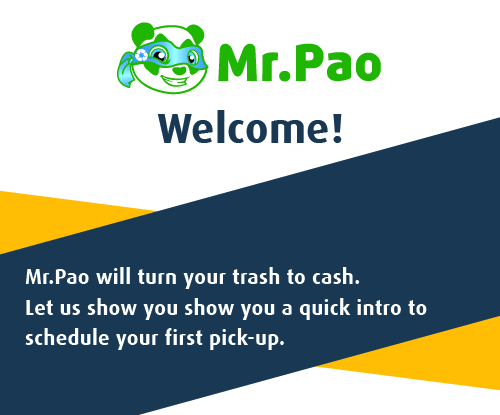
<style>
.page{position:relative;width:500px;height:415px;background:#ffffff}
.page>*{position:absolute;margin:0}
.t1{font:42.2px "DaxBold";letter-spacing:0.01em;color:#183853}
.t2{font:21.1px/30.6px "DaxBold";letter-spacing:0.01em;color:#ffffff}
</style>
<div class="page">
<p class="t1" style="left:157px;top:110px;width:185px;height:33px">Welcome!</p>
<p class="t2" style="left:25px;top:267px;width:402px;height:83px">Mr.Pao will turn your trash to cash. <br>Let us show you show you a quick intro to<br>schedule your first pick-up.</p>
</div>
